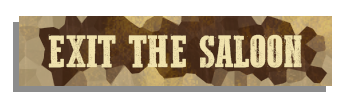
<style>
.page{position:relative;width:346px;height:108px;background:#ffffff}
.page>*{position:absolute;margin:0}
.t1{font:46.7px "WesternBangBang";color:#f0e2ad}
</style>
<div class="page">
<p class="t1" style="left:48px;top:34px;width:254px;height:34px">EXIT THE SALOON</p>
</div>
